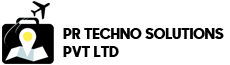
<style>
.page{position:relative;width:230px;height:65px;background:#ffffff}
.page>*{position:absolute;margin:0}
.t1{font:15px "SharpSansNo1Extrabold-Regular";color:#000000;text-transform:uppercase}
</style>
<div class="page">
<p class="t1" style="left:63px;top:28px;width:161px;height:29px">Pr techno solutions<br>pvt Ltd</p>
</div>
